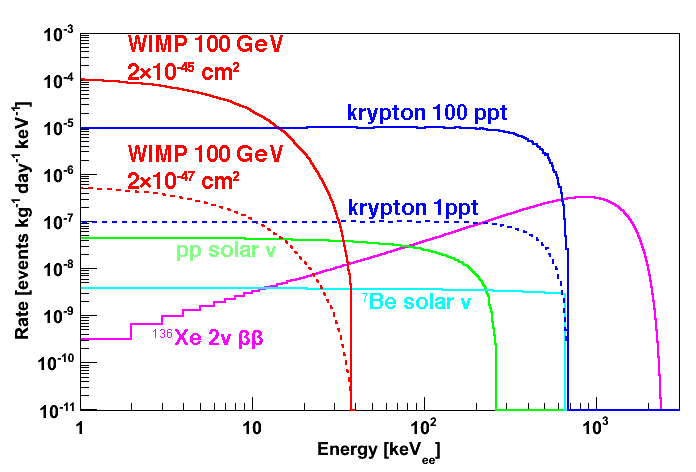
<style>
.page{position:relative;width:696px;height:472px;background:#ffffff}
.page>*{position:absolute;margin:0}
.t1{font:22.7px "Helvetica-Bold";color:#ff0000}
.t2{font:21.3px "Helvetica-Bold";color:#0000ff}
.t3{font:21.3px "Helvetica-Bold";color:#80ff80}
.t4{font:21.3px "Helvetica-Bold";color:#00ffff}
.t5{font:21.3px "Helvetica-Bold";color:#ff00ff}
</style>
<div class="page">
<p class="t1" style="left:128px;top:35px;width:155px;height:45px">WIMP 100 GeV<br>2×10-45 cm2</p>
<p class="t2" style="left:348px;top:104px;width:159px;height:20px">krypton 100 ppt</p>
<p class="t1" style="left:128px;top:145px;width:155px;height:44px">WIMP 100 GeV<br>2×10-47 cm2</p>
<p class="t2" style="left:349px;top:199px;width:129px;height:20px">krypton 1ppt</p>
<p class="t3" style="left:177px;top:241px;width:99px;height:20px">pp solar ν</p>
<p class="t4" style="left:362px;top:293px;width:109px;height:16px">7Be solar ν</p>
<p class="t5" style="left:153px;top:329px;width:110px;height:20px">136Xe 2ν ββ</p>
</div>
